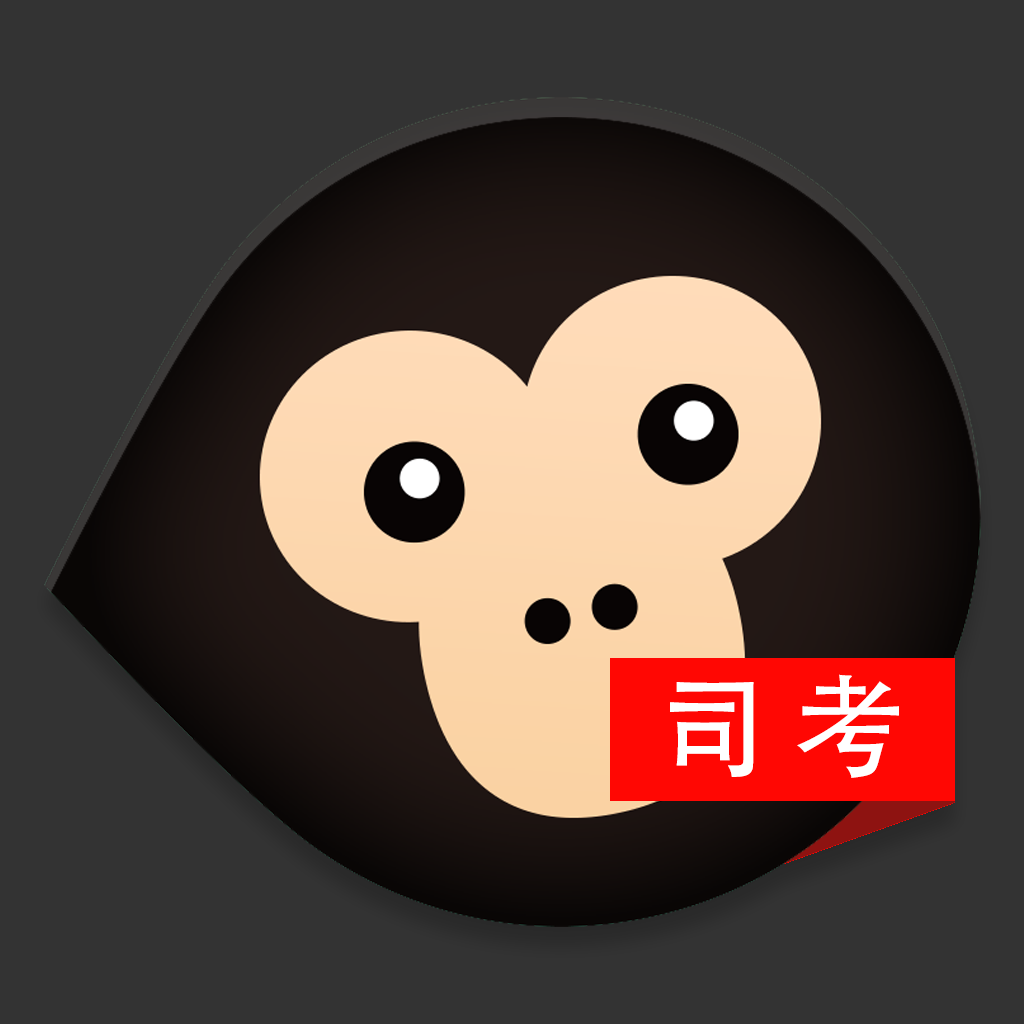
<style>
.page{position:relative;width:1024px;height:1024px;background:#333333}
.page>*{position:absolute;margin:0}
.t1{font:110px "AdobeHeitiStd-Regular";color:#ffffff}
</style>
<div class="page">
<p class="t1" style="left:670px;top:674px;width:229px;height:104px">司 考</p>
</div>
